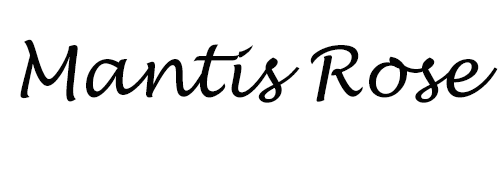
<style>
.page{position:relative;width:500px;height:170px;background:#ffffff}
.page>*{position:absolute;margin:0}
.t1{font:70px "LucidaHandwriting-Italic";color:#040404}
</style>
<div class="page">
<p class="t1" style="left:20px;top:39px;width:478px;height:64px">Mantis Rose</p>
</div>
